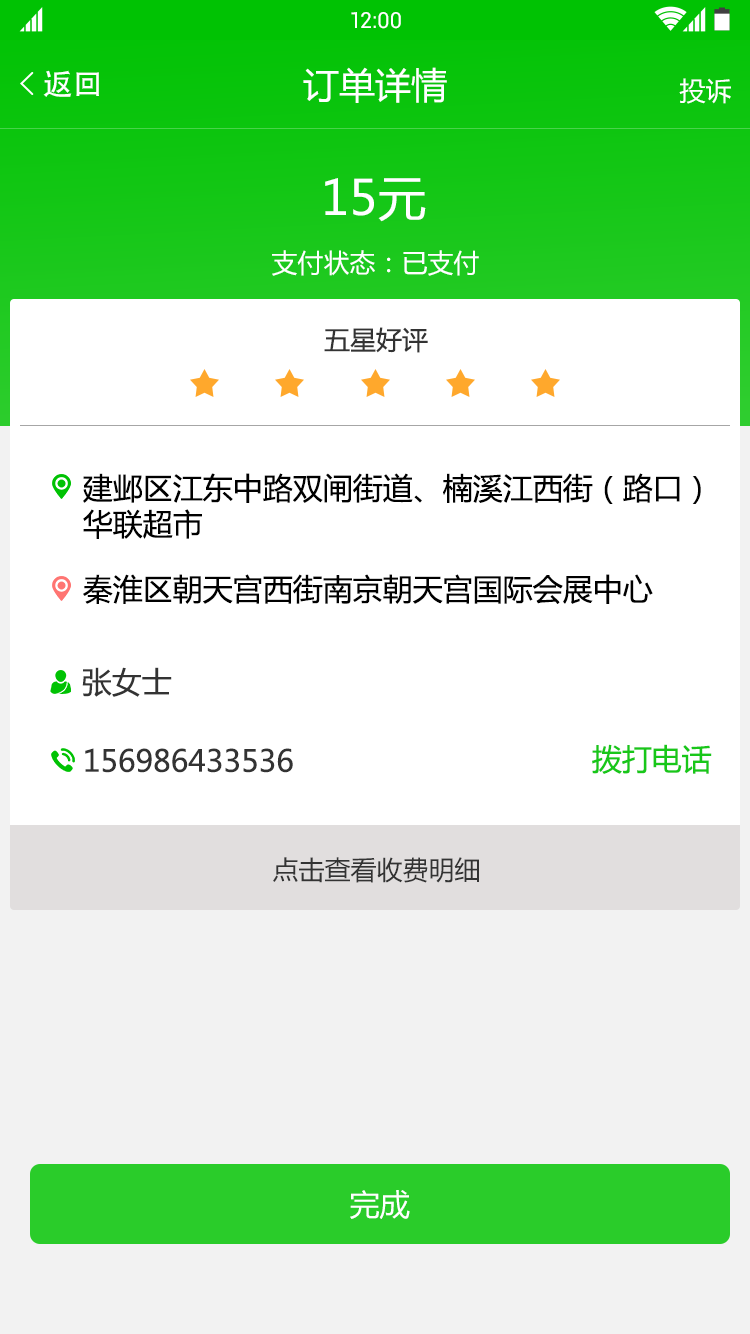
<style>
.page{position:relative;width:750px;height:1334px;background:#ffffff}
.page>*{position:absolute;margin:0}
.t1{font:22px "Roboto-Regular";color:#ffffff}
.t2{font:30px "AdobeHeitiStd-Regular";color:#ffffff}
.t3{font:36px "MicrosoftYaHei";color:#ffffff}
.t4{font:26px "MicrosoftYaHei";color:#ffffff}
.t5{font:48px "MicrosoftYaHei";color:#ffffff}
.t6{font:26px "MicrosoftYaHei";color:#333333;text-transform:uppercase}
.t7{font:30px "MicrosoftYaHei";color:#000000;text-transform:uppercase}
.t8{font:30px "MicrosoftYaHei";color:#333333;text-transform:uppercase}
.t9{font:30px "MicrosoftYaHei";color:#18c719;text-transform:uppercase}
.t10{font:26px "MicrosoftYaHei";color:#333333}
.t11{font:30px "MicrosoftYaHei";color:#ffffff}
</style>
<div class="page">
<p class="t1" style="left:351px;top:12px;width:50px;height:17px">12:00</p>
<p class="t2" style="left:43px;top:70px;width:56px;height:27px">返回</p>
<p class="t3" style="left:303px;top:67px;width:144px;height:36px">订单详情</p>
<p class="t4" style="left:679px;top:78px;width:52px;height:26px">投诉</p>
<p class="t5" style="left:325px;top:178px;width:101px;height:44px">15元</p>
<p class="t4" style="left:272px;top:250px;width:207px;height:26px">支付状态：已支付</p>
<p class="t6" style="left:324px;top:327px;width:104px;height:26px">五星好评</p>
<p class="t7" style="left:83px;top:473px;width:618px;height:66px">建邺区江东中路双闸街道、楠溪江西街（路口）<br>华联超市</p>
<p class="t7" style="left:83px;top:574px;width:570px;height:30px">秦淮区朝天宫西街南京朝天宫国际会展中心</p>
<p class="t8" style="left:82px;top:667px;width:90px;height:30px">张女士</p>
<p class="t8" style="left:85px;top:748px;width:208px;height:25px">156986433536</p>
<p class="t9" style="left:592px;top:744px;width:120px;height:30px">拨打电话</p>
<p class="t10" style="left:273px;top:857px;width:206px;height:26px">点击查看收费明细</p>
<p class="t11" style="left:350px;top:1190px;width:60px;height:29px">完成</p>
</div>
